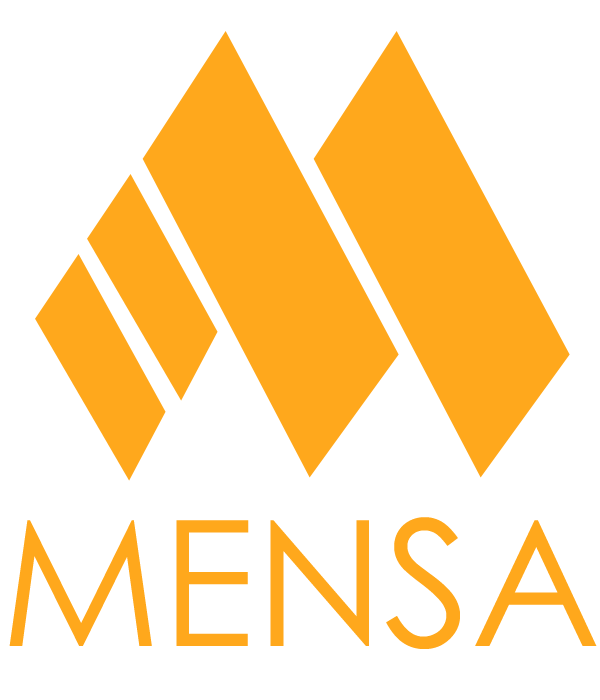
<style>
.page{position:relative;width:600px;height:700px;background:#ffffff}
.page>*{position:absolute;margin:0}
.t1{font:175px "CenturyGothic";color:#ffa81c}
</style>
<div class="page">
<p class="t1" style="left:9px;top:517px;width:588px;height:132px">MENSA</p>
</div>
